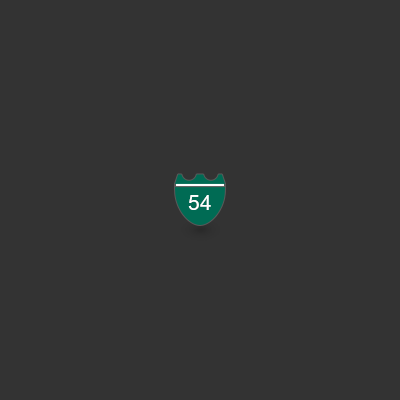
<style>
.page{position:relative;width:400px;height:400px;background:#333333}
.page>*{position:absolute;margin:0}
.t1{font:21px "ArialMT";color:#ffffff}
</style>
<div class="page">
<p class="t1" style="left:188px;top:195px;width:23px;height:15px">54</p>
</div>
